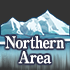
<style>
.page{position:relative;width:70px;height:70px;background:#333333}
.page>*{position:absolute;margin:0}
.t1{font:16px/15px "RyuminPro-ExBold";letter-spacing:-0.04em;color:#ffffff;scale:0.9 1}
</style>
<div class="page">
<p class="t1" style="left:5px;top:36px;width:59px;height:28px;text-align:center">Northern<br>Area</p>
</div>
